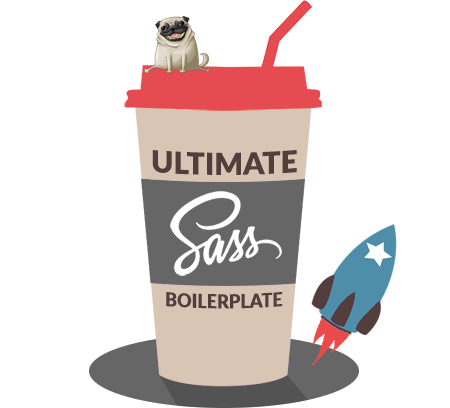
<style>
.page{position:relative;width:450px;height:408px;background:#ffffff}
.page>*{position:absolute;margin:0}
.t1{font:30px "Lato-Black";color:#533e3e}
.t2{font:18px "Lato-Black";color:#533e3e}
</style>
<div class="page">
<p class="t1" style="left:152px;top:150px;width:145px;height:25px">ULTIMATE</p>
<p class="t2" style="left:166px;top:292px;width:117px;height:17px">BOILERPLATE</p>
</div>
